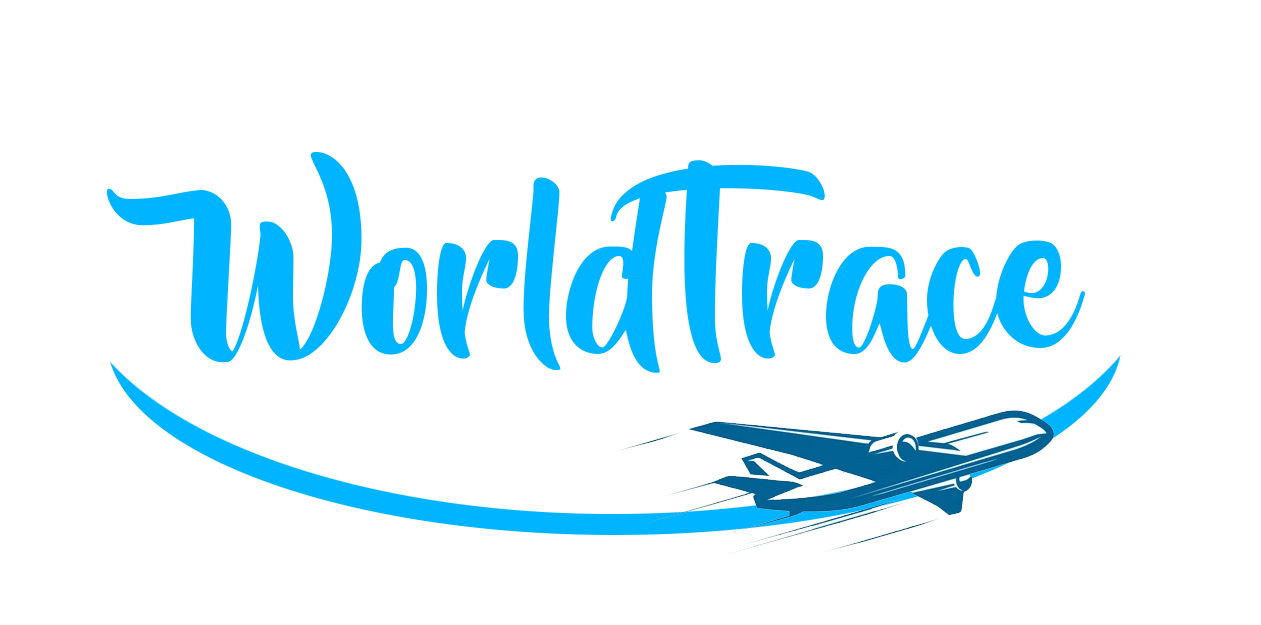
<style>
.page{position:relative;width:1261px;height:625px;background:#ffffff}
.page>*{position:absolute;margin:0}
.t1{font:200px "BeyondTheMountains";color:#00b4ff}
</style>
<div class="page">
<p class="t1" style="left:106px;top:152px;width:979px;height:221px">WorldTrace</p>
</div>
